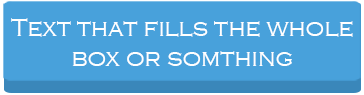
<style>
.page{position:relative;width:364px;height:95px;background:#48a1db}
.page>*{position:absolute;margin:0}
.t1{font:25px "CopperplateGothic-Light";color:#ffffff}
</style>
<div class="page">
<p class="t1" style="left:11px;top:18px;width:342px;height:48px;text-align:center">Text that fills the whole<br>box or somthing</p>
</div>
